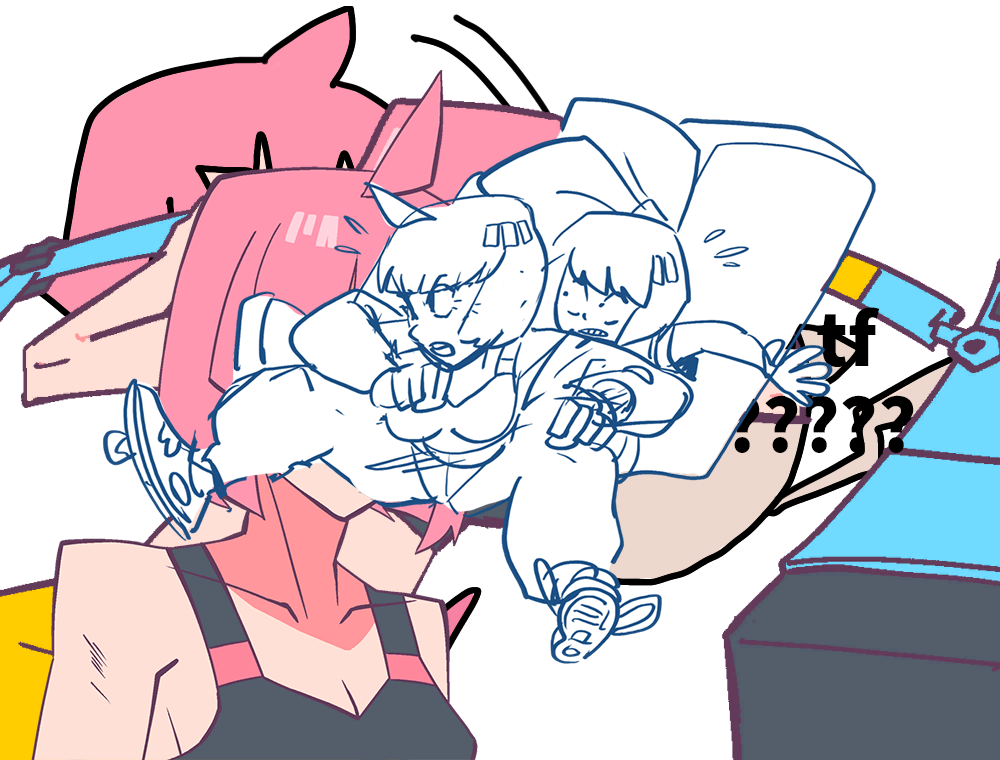
<style>
.page{position:relative;width:1000px;height:760px;background:#ffffff}
.page>*{position:absolute;margin:0}
.t1{font:72px "NotoSansJP-Black"}
</style>
<div class="page">
<p class="t1" style="left:572px;top:307px;width:342px;height:146px">where tf<br>am i?????</p>
</div>
